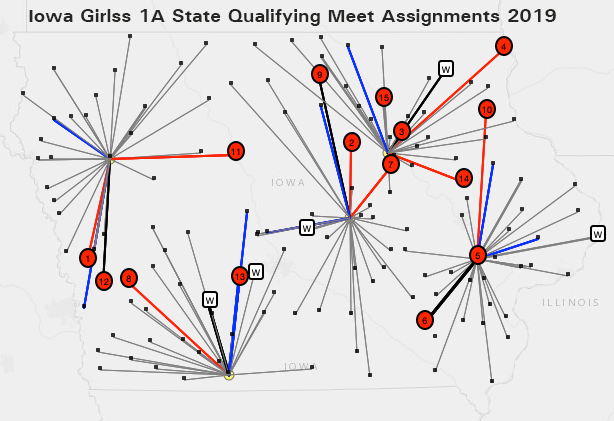
<style>
.page{position:relative;width:614px;height:421px;background:#efefef}
.page>*{position:absolute;margin:0}
.t1{font:18px "Univers-Bold";color:#262624;scale:1.11 1}
</style>
<div class="page">
<p class="t1" style="left:29px;top:9px;width:527px;height:17px">Iowa Girlss 1A State Qualifying Meet Assignments 2019</p>
</div>
